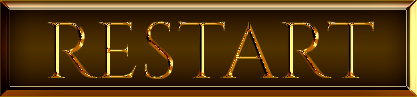
<style>
.page{position:relative;width:417px;height:97px}
.page>*{position:absolute;margin:0}
.t1{font:79.2px "Cinzel-Regular"}
</style>
<div class="page">
<p class="t1" style="left:47px;top:21px;width:327px;height:58px">RESTART</p>
<p class="t1" style="left:47px;top:21px;width:327px;height:58px">RESTART</p>
</div>
